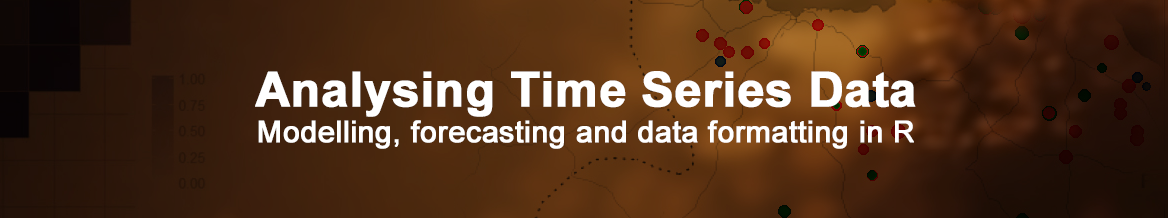
<style>
.page{position:relative;width:1168px;height:218px}
.page>*{position:absolute;margin:0}
.t1{font:30px "ArialMT";color:#ffffff;font-weight:bold}
.t2{font:48px "Arial-BoldMT";color:#ffffff;font-weight:bold}
</style>
<div class="page">
<p class="t1" style="left:255px;top:71px;width:661px;height:78px;text-align:center"><span class="t2">Analysing Time Series Data<br></span>Modelling, forecasting and data formatting in R</p>
</div>
